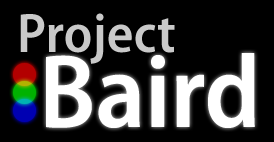
<style>
.page{position:relative;width:274px;height:142px;background:#000000}
.page>*{position:absolute;margin:0}
.t1{font:56px "MyriadPro-SemiboldSemiCn";color:#c9c9c9}
.t2{font:105px "MyriadPro-SemiboldSemiCn";color:#ffffff}
</style>
<div class="page">
<p class="t1" style="left:20px;top:13px;width:155px;height:51px">Project</p>
<p class="t2" style="left:46px;top:53px;width:209px;height:75px">Baird</p>
</div>
